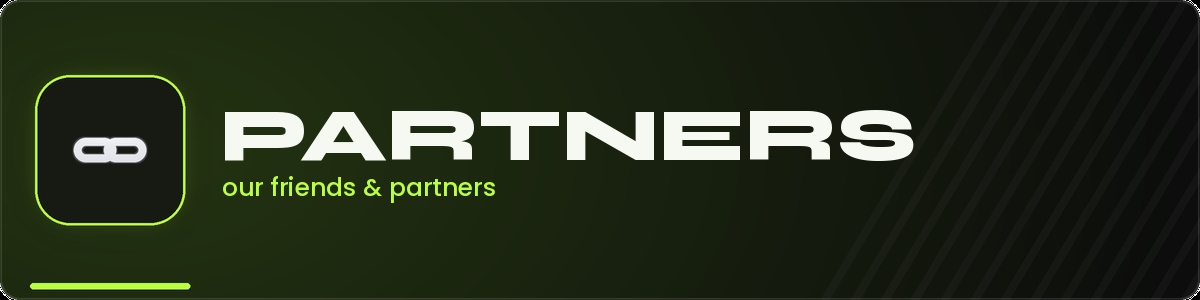
<style>
.page{position:relative;width:1200px;height:300px}
.page>*{position:absolute;margin:0}
.t1{font:75px "Syne-ExtraBold";color:#f6f8f2}
.t2{font:25px "Poppins-Medium";color:#baff40}
</style>
<div class="page">
<p class="t1" style="left:225px;top:110px;width:689px;height:51px">PARTNERS</p>
<p class="t2" style="left:223px;top:176px;width:272px;height:27px">our friends &amp; partners</p>
</div>
